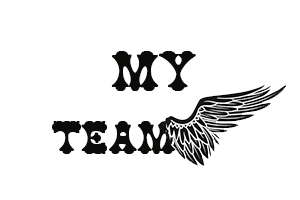
<style>
.page{position:relative;width:300px;height:200px;background:#ffffff}
.page>*{position:absolute;margin:0}
.t1{font:83.3px "DSNThongChai";color:#0b0b0a;font-weight:bold}
.t2{font:66.7px "DSNThongChai";color:#0b0b0a;font-weight:bold}
</style>
<div class="page">
<p class="t1" style="left:111px;top:51px;width:85px;height:40px">MY</p>
<p class="t2" style="left:52px;top:121px;width:124px;height:33px">team</p>
</div>
